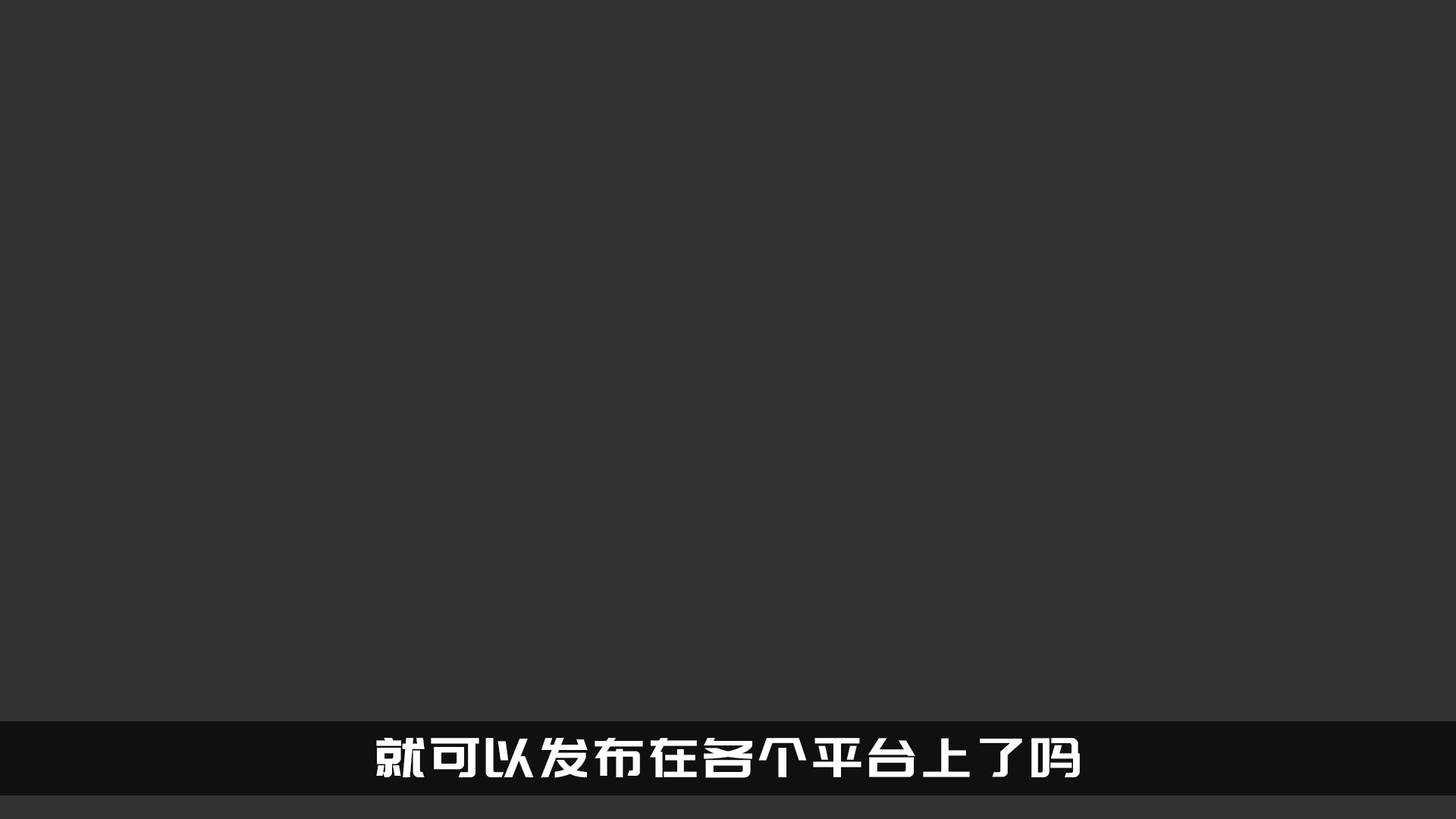
<style>
.page{position:relative;width:1456px;height:819px;background:#333333}
.page>*{position:absolute;margin:0}
.t1{font:54.6px "PangMenZhengDao-3";color:#ffffff}
</style>
<div class="page">
<p class="t1" style="left:376px;top:737px;width:704px;height:41px">就可以发布在各个平台上了吗</p>
</div>
